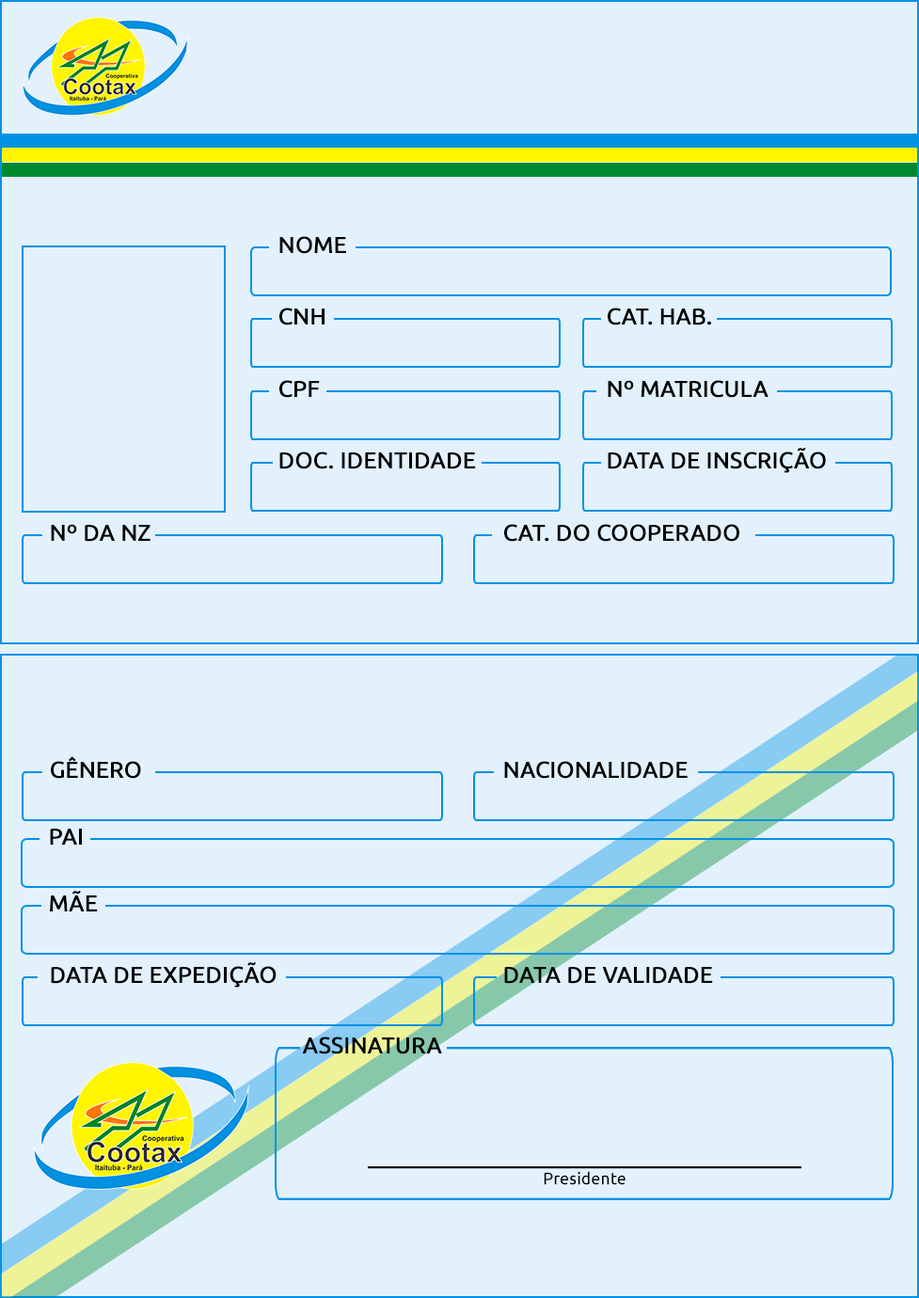
<style>
.page{position:relative;width:919px;height:1298px;background:#e3f1fd}
.page>*{position:absolute;margin:0}
.t1{font:22.6px "Ubuntu";color:#000000;text-transform:uppercase;font-weight:bold}
.t2{font:22.6px "Ubuntu";color:#000000;font-weight:bold}
.t3{font:16.9px "Ubuntu";color:#000000}
</style>
<div class="page">
<p class="t1" style="left:279px;top:236px;width:67px;height:18px">Nome</p>
<p class="t2" style="left:279px;top:308px;width:45px;height:17px">CNH</p>
<p class="t2" style="left:608px;top:308px;width:103px;height:17px">CAT. HAB.</p>
<p class="t2" style="left:279px;top:380px;width:41px;height:18px">CPF</p>
<p class="t1" style="left:608px;top:380px;width:160px;height:18px">Nº Matricula</p>
<p class="t1" style="left:608px;top:448px;width:218px;height:25px">Data de Inscrição</p>
<p class="t2" style="left:279px;top:451px;width:197px;height:18px">DOC. IDENTIDADE</p>
<p class="t2" style="left:51px;top:524px;width:99px;height:18px">Nº DA NZ</p>
<p class="t1" style="left:504px;top:524px;width:235px;height:18px">CAt. do cooperado</p>
<p class="t2" style="left:51px;top:756px;width:90px;height:23px">GÊNERO</p>
<p class="t1" style="left:504px;top:761px;width:183px;height:18px">Nacionalidade</p>
<p class="t1" style="left:50px;top:829px;width:32px;height:16px">PAI</p>
<p class="t1" style="left:50px;top:891px;width:48px;height:20px">mÃE</p>
<p class="t2" style="left:51px;top:962px;width:225px;height:25px">DATA DE EXPEDIÇÃO</p>
<p class="t1" style="left:504px;top:967px;width:209px;height:17px">data de validade</p>
<p class="t1" style="left:302px;top:1036px;width:140px;height:18px">Assinatura</p>
<p class="t2" style="left:368px;top:1166px;width:433px;height:19px;text-align:center">_____________________________________<br><span class="t3">Presidente</span></p>
</div>
